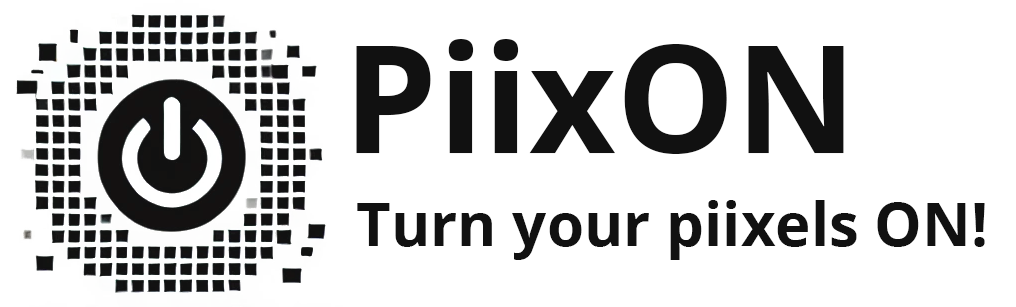
<style>
.page{position:relative;width:1016px;height:307px;background:#ffffff}
.page>*{position:absolute;margin:0}
.t1{font:150px "OpenSans-Bold";color:#111111}
.t2{font:60px "OpenSans-Bold";color:#111111}
</style>
<div class="page">
<p class="t1" style="left:356px;top:39px;width:488px;height:115px">PiixON</p>
<p class="t2" style="left:357px;top:200px;width:628px;height:60px">Turn your piixels ON!</p>
</div>
